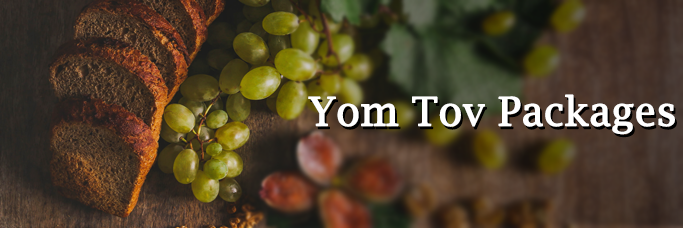
<style>
.page{position:relative;width:683px;height:228px}
.page>*{position:absolute;margin:0}
.t1{font:39.3px "LucidaBright";color:#ffffff;font-weight:bold}
</style>
<div class="page">
<p class="t1" style="left:308px;top:94px;width:367px;height:41px">Yom Tov Packages</p>
</div>
